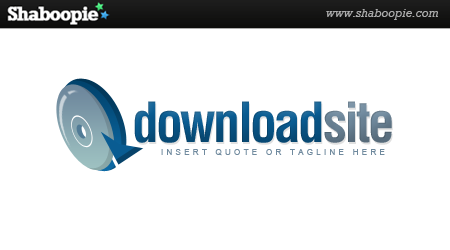
<style>
.page{position:relative;width:450px;height:250px;background:#ffffff}
.page>*{position:absolute;margin:0}
.t1{font:53.9px "Helvetica-Condensed-Bold";letter-spacing:-0.05em;color:#095c92}
.t2{font:53.9px "Helvetica-Condensed-Bold";letter-spacing:-0.05em;color:#708a9e}
.t3{font:8.1px "ArialMT";letter-spacing:0.4em;color:#708a9e}
</style>
<div class="page">
<p class="t1" style="left:134px;top:101px;width:258px;height:42px">download<span class="t2">site</span></p>
<p class="t3" style="left:161px;top:149px;width:224px;height:7px">INSERT QUOTE OR TAGLINE HERE</p>
</div>
